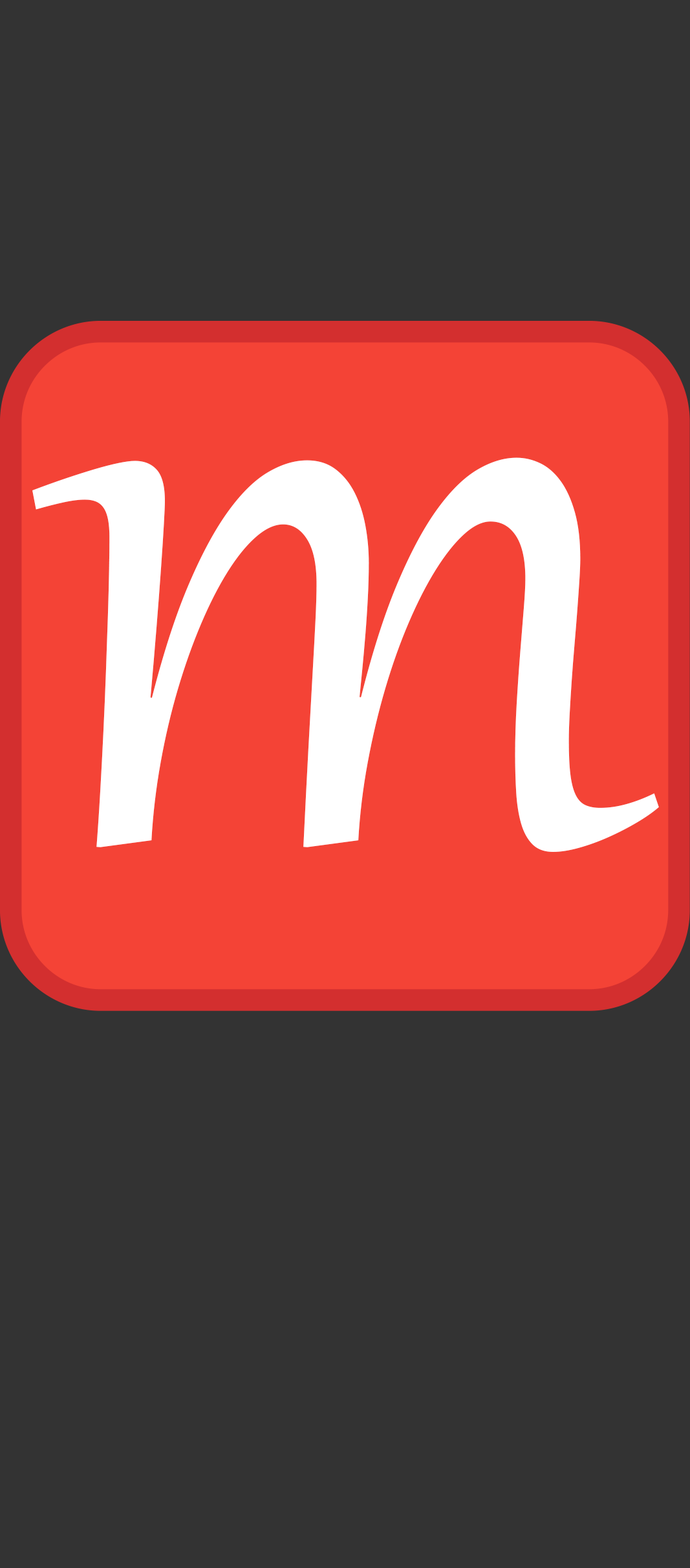
<style>
.page{position:relative;width:690px;height:1568px;background:#333333}
.page>*{position:absolute;margin:0}
.t1{font:1078.1px "Gabriola";color:#ffffff;scale:0.93 1}
</style>
<div class="page">
<p class="t1" style="left:32px;top:457px;width:627px;height:395px">m</p>
</div>
